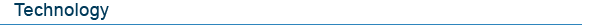
<style>
.page{position:relative;width:597px;height:26px;background:#ffffff}
.page>*{position:absolute;margin:0}
.t1{font:18px "ArialMT";letter-spacing:0.025em;color:#003a5a}
</style>
<div class="page">
<p class="t1" style="left:14px;top:3px;width:95px;height:17px">Technology</p>
</div>
